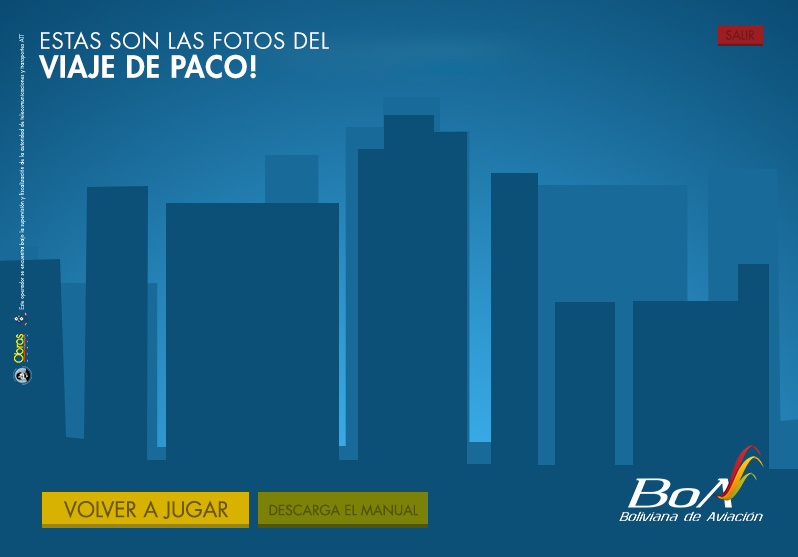
<style>
.page{position:relative;width:798px;height:557px;background:#0c4f77}
.page>*{position:absolute;margin:0}
.t1{font:12.2px "FuturaStd-Book";color:#72171a}
.t2{font:21.9px "FuturaStd-Book";letter-spacing:0.025em;color:#ffffff;text-transform:uppercase}
.t3{font:29.9px/29px "FuturaStd-Heavy";letter-spacing:0.025em;color:#ffffff;text-transform:uppercase}
.t4{font:21px "FuturaStd-Book";color:#6a5703}
.t5{font:13.6px "FuturaStd-Book";color:#525505}
</style>
<div class="page">
<p class="t1" style="left:725px;top:30px;width:30px;height:10px">SALIR</p>
<p class="t2" style="left:38px;top:31px;width:291px;height:48px">Estas son las fotos del<br><span class="t3">viaje de Paco!</span></p>
<p class="t4" style="left:63px;top:500px;width:166px;height:19px">VOLVER A JUGAR</p>
<p class="t5" style="left:269px;top:504px;width:149px;height:12px">DESCARGA EL MANUAL</p>
</div>
